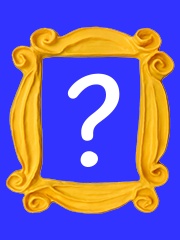
<style>
.page{position:relative;width:180px;height:240px;background:#3333ff}
.page>*{position:absolute;margin:0}
.t1{font:129.2px "UberhandPro-Medium";color:#ffffff}
</style>
<div class="page">
<p class="t1" style="left:67px;top:73px;width:53px;height:94px;rotate:-7deg">?</p>
</div>
